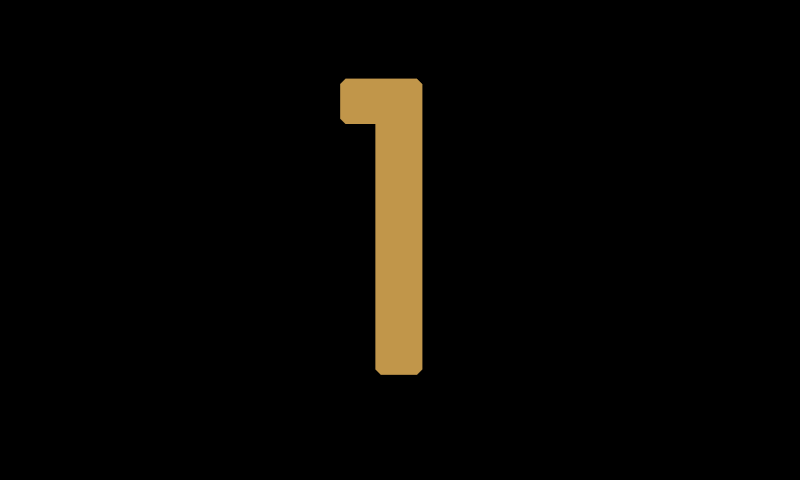
<style>
.page{position:relative;width:800px;height:480px;background:#000000}
.page>*{position:absolute;margin:0}
.t1{font:400px "FuturaBT-MediumCondensed";color:#c1964a;font-weight:bold}
</style>
<div class="page">
<p class="t1" style="left:340px;top:78px;width:83px;height:297px">1</p>
</div>
